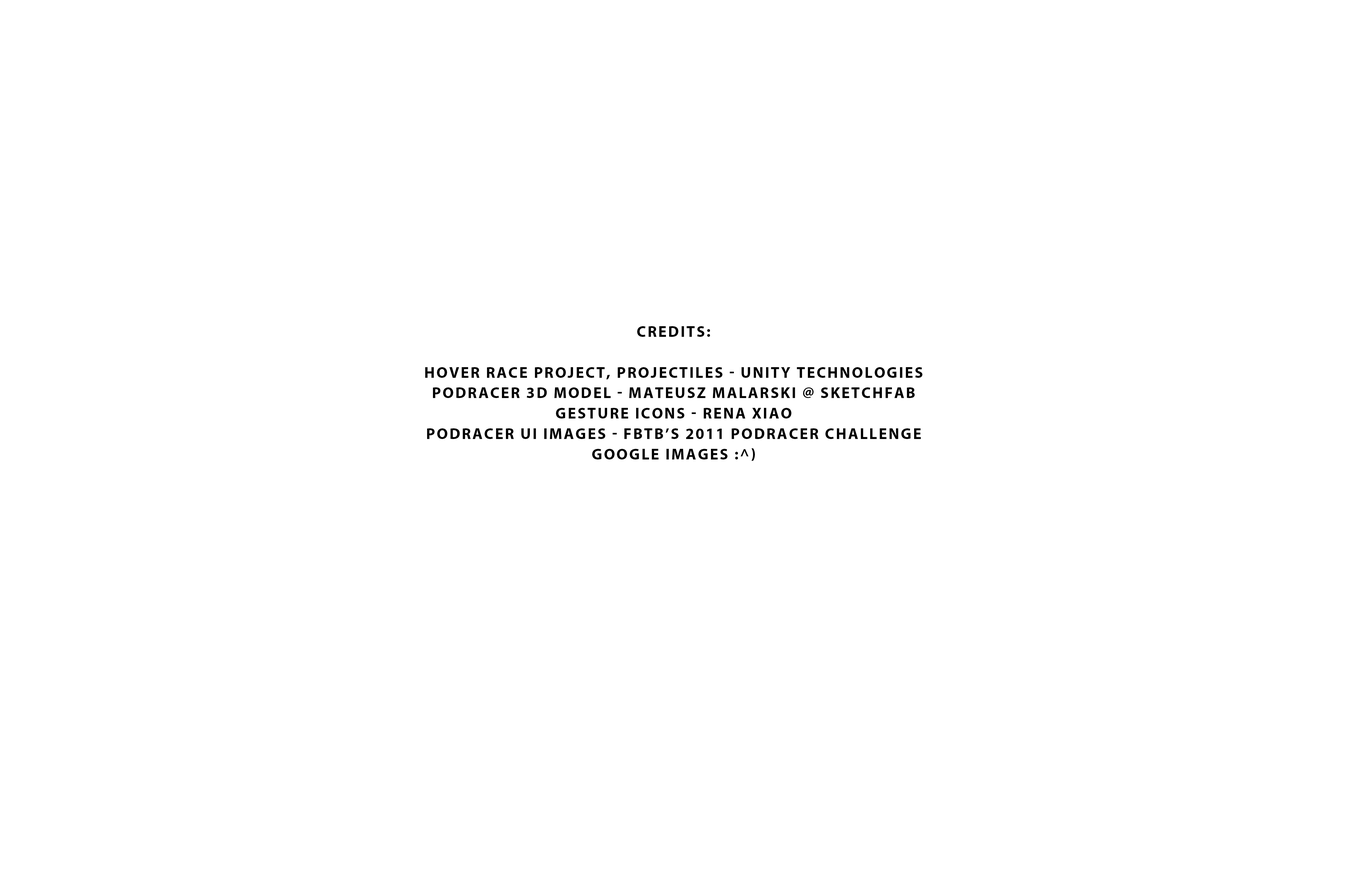
<style>
.page{position:relative;width:1358px;height:878px;background:#ffffff}
.page>*{position:absolute;margin:0}
.t1{font:15.5px/20.4px "MyriadPro-Bold";letter-spacing:0.1em;color:#000000;text-transform:uppercase}
</style>
<div class="page">
<p class="t1" style="left:425px;top:326px;width:497px;height:135px;text-align:center">credits:<br><br>hover race project, projectiles - unity technologies<br>podracer 3d model - Mateusz Malarski @ sketchfab<br>gesture icons - rena xiao<br>podracer ui images - FBTB’s 2011 Podracer Challenge<br>google images :^)</p>
</div>
